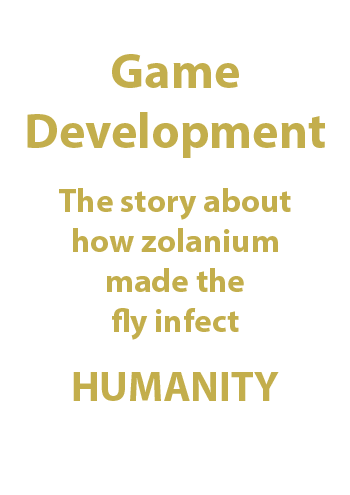
<style>
.page{position:relative;width:350px;height:495px;background:#ffffff}
.page>*{position:absolute;margin:0}
.t1{font:50px "MyriadPro-Bold";color:#c3ae4c}
.t2{font:33.3px "MyriadPro-Bold";color:#c3ae4c}
.t3{font:41.7px "MyriadPro-Bold";color:#c3ae4c}
</style>
<div class="page">
<p class="t1" style="left:27px;top:54px;width:298px;height:104px;text-align:center">Game<br>Development</p>
<p class="t2" style="left:59px;top:188px;width:232px;height:152px;text-align:center">The story about<br>how zolanium<br>made the<br>fly infect</p>
<p class="t3" style="left:73px;top:372px;width:206px;height:29px">HUMANITY</p>
</div>
